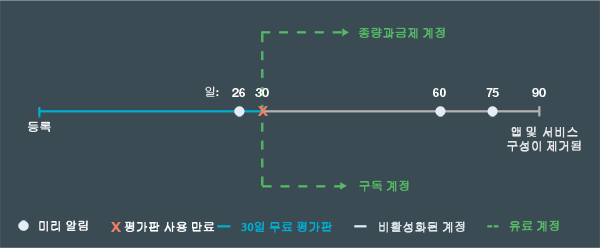
<style>
.page{position:relative;width:600px;height:248px;background:#3b4b54}
.page>*{position:absolute;margin:0}
.t1{font:11.9px "Gulim";color:#56bb66;font-weight:bold}
.t2{font:11.9px "Gulim";color:#ffffff}
.t3{font:11.9px "MyriadPro-Regular";color:#ffffff;font-weight:bold}
.t4{font:11.9px "HelvNeueBoldforIBM";color:#ffffff}
.t5{font:12.7px "HelvNeueBoldforIBM";color:#f47d64;scale:1.17 1}
.t6{font:11.9px "Gulim";color:#ffffff;font-weight:bold}
.t7{font:11.9px "Gulim";color:#e5e7e8;font-weight:bold}
.t8{font:11.9px "Gulim";color:#00aed1;font-weight:bold}
.t9{font:11.9px "MyriadPro-Regular";color:#00aed1;font-weight:bold}
.t10{font:11.9px "Gulim";color:#dfe6eb;font-weight:bold}
</style>
<div class="page">
<p class="t1" style="left:358px;top:27px;width:87px;height:12px">종량과금제 계정</p>
<p class="t2" style="left:205px;top:86px;width:14px;height:11px">일<span class="t3">:</span></p>
<p class="t4" style="left:232px;top:88px;width:13px;height:9px">26</p>
<p class="t4" style="left:255px;top:88px;width:14px;height:9px">30</p>
<p class="t4" style="left:433px;top:88px;width:13px;height:9px">60</p>
<p class="t4" style="left:486px;top:88px;width:13px;height:9px">75</p>
<p class="t4" style="left:532px;top:88px;width:14px;height:9px">90</p>
<p class="t5" style="left:258px;top:106px;width:10px;height:10px">X</p>
<p class="t6" style="left:27px;top:121px;width:24px;height:11px">등록</p>
<p class="t7" style="left:507px;top:126px;width:74px;height:26px;text-align:center">앱 및 서비스 <br>구성이 제거됨</p>
<p class="t1" style="left:359px;top:180px;width:50px;height:12px">구독 계정</p>
<p class="t6" style="left:39px;top:220px;width:49px;height:12px">미리 알림</p>
<p class="t5" style="left:111px;top:222px;width:10px;height:10px">X</p>
<p class="t6" style="left:124px;top:221px;width:91px;height:11px">평가판 사용 만료</p>
<p class="t8" style="left:241px;top:221px;width:91px;height:12px"><span class="t9">30</span>일 무료 평가판</p>
<p class="t10" style="left:379px;top:221px;width:86px;height:12px">비활성화된 계정</p>
<p class="t1" style="left:509px;top:220px;width:50px;height:12px">유료 계정</p>
</div>
